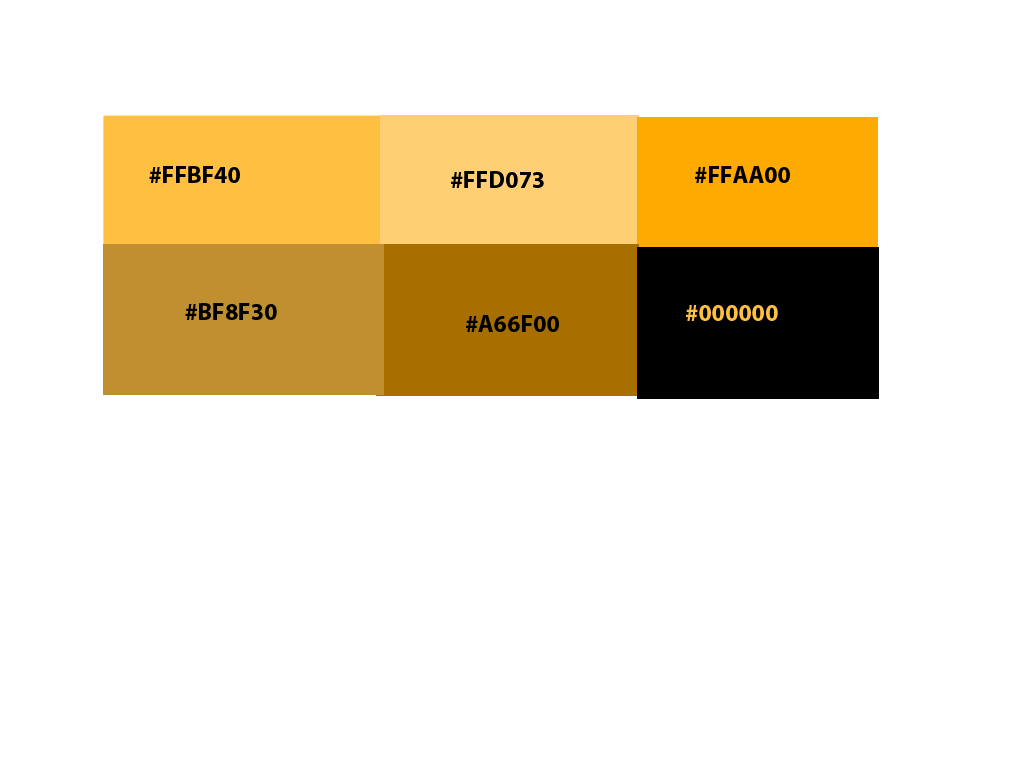
<style>
.page{position:relative;width:1024px;height:768px;background:#ffffff}
.page>*{position:absolute;margin:0}
.t1{font:24px "MyriadPro-Bold";color:#000000}
.t2{font:24px "MyriadPro-Bold";color:#ffbf40}
</style>
<div class="page">
<p class="t1" style="left:149px;top:166px;width:91px;height:17px">#FFBF40</p>
<p class="t1" style="left:451px;top:171px;width:93px;height:17px">#FFD073</p>
<p class="t1" style="left:695px;top:166px;width:95px;height:17px">#FFAA00</p>
<p class="t1" style="left:185px;top:303px;width:92px;height:17px">#BF8F30</p>
<p class="t2" style="left:686px;top:305px;width:92px;height:16px">#000000</p>
<p class="t1" style="left:466px;top:315px;width:93px;height:17px">#A66F00</p>
</div>
